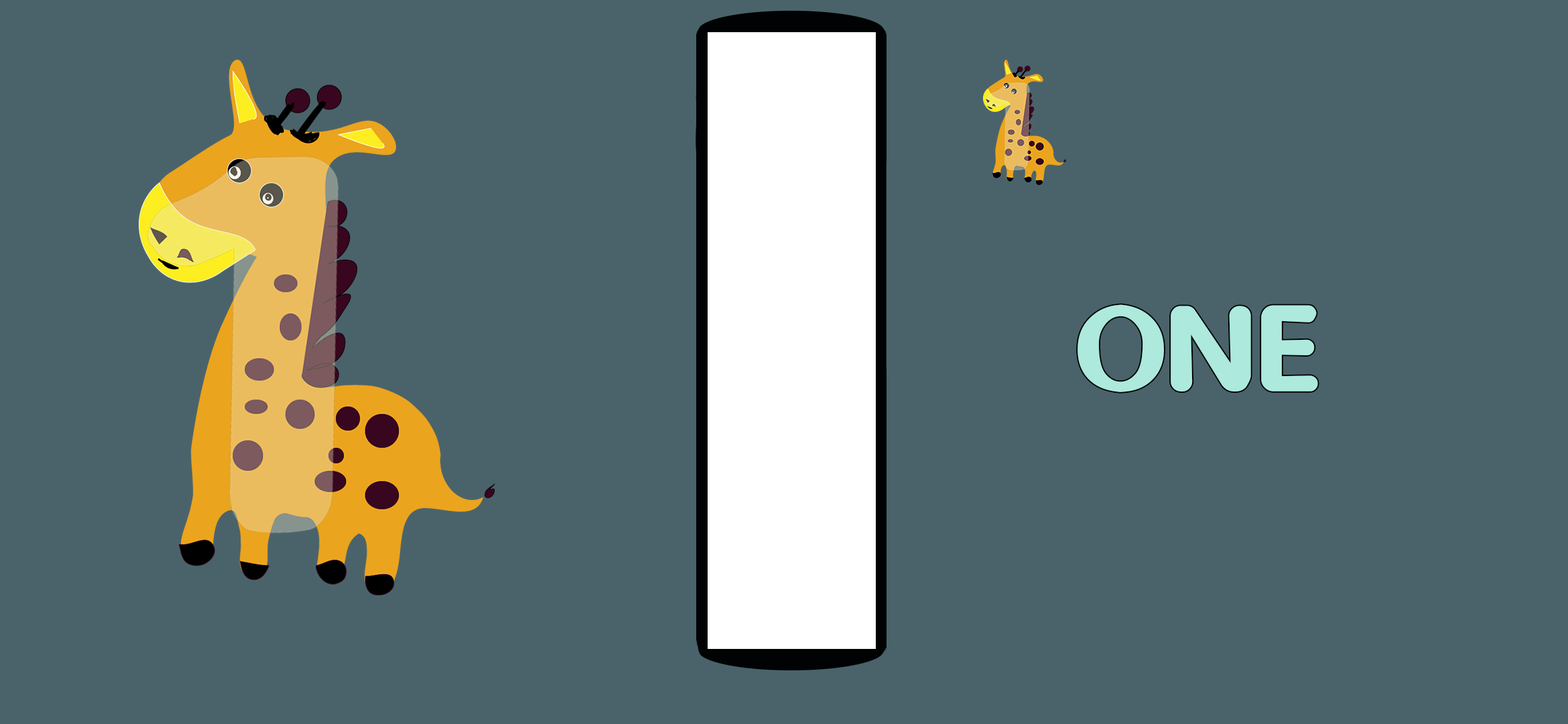
<style>
.page{position:relative;width:1568px;height:724px;background:#4a636b}
.page>*{position:absolute;margin:0}
.t1{font:139.6px "Dyuthi";color:#ade9dd}
</style>
<div class="page">
<p class="t1" style="left:1077px;top:304px;width:241px;height:88px">ONE</p>
</div>
